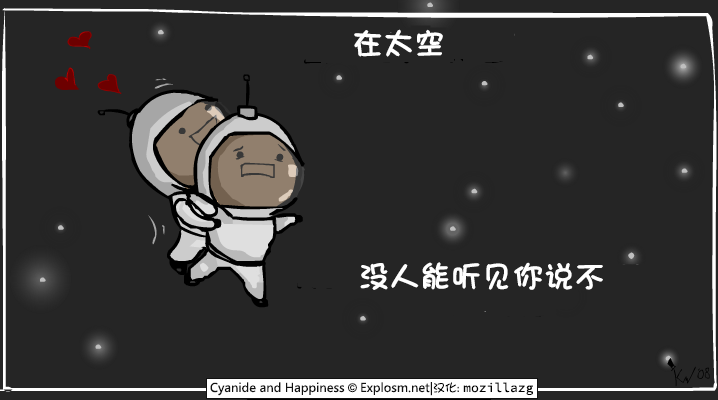
<style>
.page{position:relative;width:718px;height:400px;background:#252525}
.page>*{position:absolute;margin:0}
.t1{font:30px "DFGirl";color:#ffffff;font-weight:bold}
</style>
<div class="page">
<p class="t1" style="left:354px;top:29px;width:89px;height:28px">在太空</p>
<p class="t1" style="left:360px;top:262px;width:243px;height:28px">没人能听见你说不</p>
</div>
